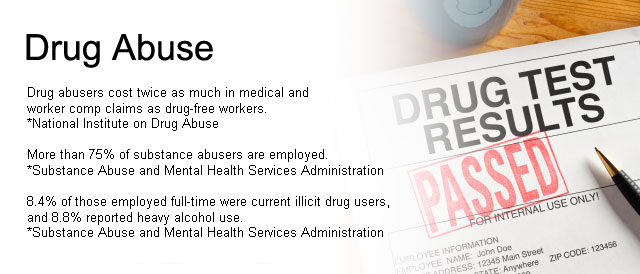
<style>
.page{position:relative;width:640px;height:274px;background:#ffffff}
.page>*{position:absolute;margin:0}
.t1{font:36px "ArialMT";color:#000000}
.t2{font:13px "ArialMT";color:#000000}
</style>
<div class="page">
<p class="t1" style="left:26px;top:34px;width:187px;height:34px">Drug Abuse</p>
<p class="t2" style="left:27px;top:87px;width:362px;height:150px">Drug abusers cost twice as much in medical and <br>worker comp claims as drug-free workers.<br>*National Institute on Drug Abuse<br><br>More than 75% of substance abusers are employed.<br>*Substance Abuse and Mental Health Services Administration<br><br>8.4% of those employed full-time were current illicit drug users, <br>and 8.8% reported heavy alcohol use.<br>*Substance Abuse and Mental Health Services Administration</p>
</div>
